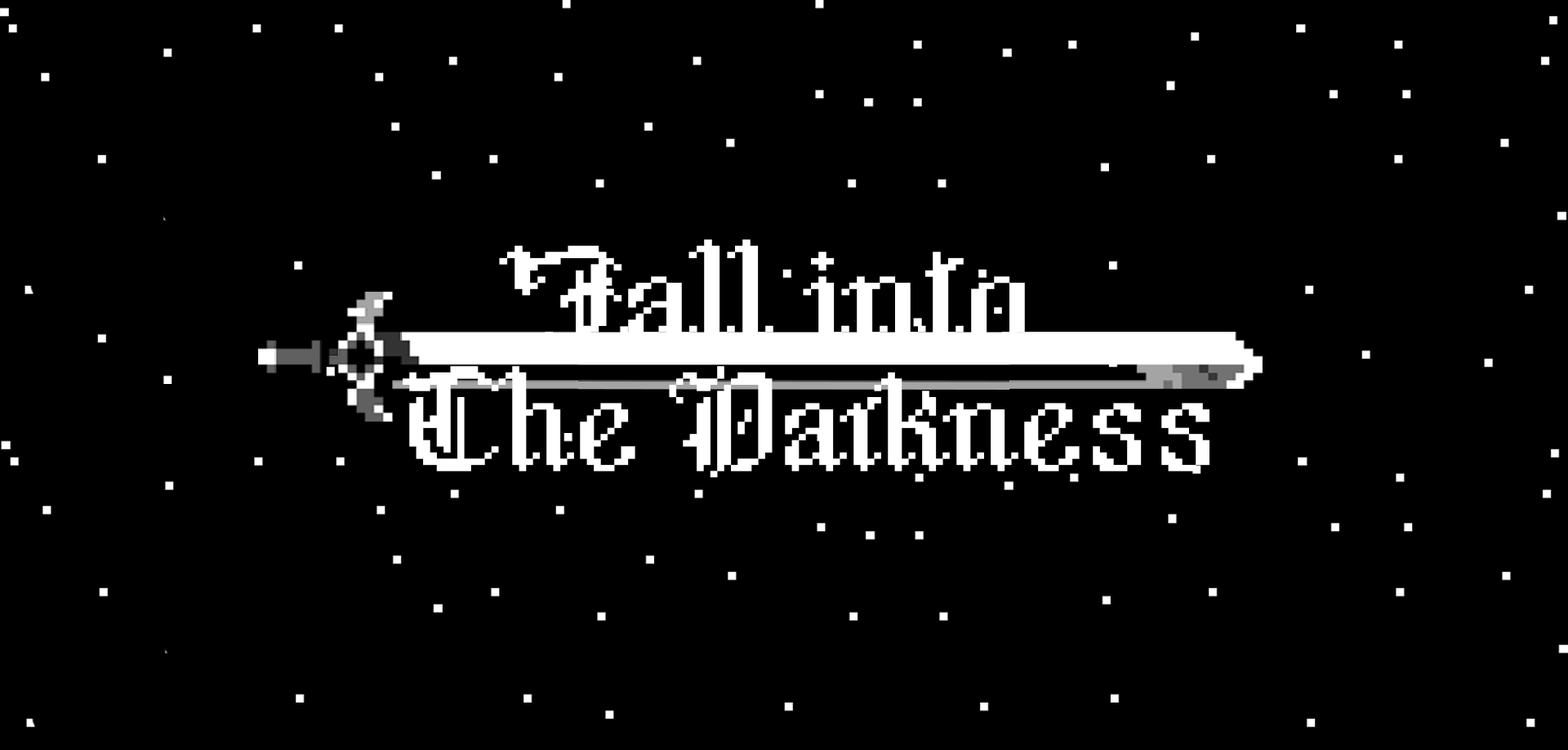
<style>
.page{position:relative;width:1568px;height:750px;background:#000000}
.page>*{position:absolute;margin:0}
.t1{font:147.6px "NicerNightie";color:#ffffff;scale:1.24 1}
.t2{font:147.6px "NicerNightie";color:#ffffff;scale:1.11 1}
</style>
<div class="page">
<p class="t1" style="left:499px;top:239px;width:526px;height:106px">Fall into</p>
<p class="t2" style="left:403px;top:366px;width:806px;height:112px">The Darkness</p>
</div>
